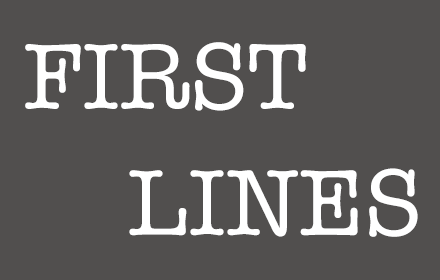
<style>
.page{position:relative;width:440px;height:280px;background:#514f4e}
.page>*{position:absolute;margin:0}
.t1{font:96px "AmericanTypewriter";color:#ffffff}
</style>
<div class="page">
<p class="t1" style="left:25px;top:42px;width:281px;height:69px">FIRST</p>
<p class="t1" style="left:129px;top:168px;width:289px;height:69px">LINES</p>
</div>
